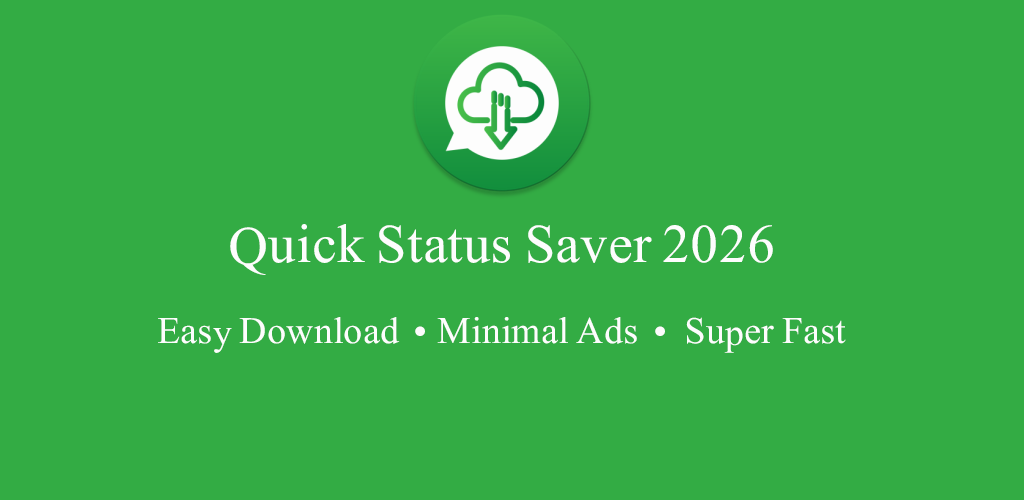
<style>
.page{position:relative;width:1024px;height:500px;background:#33ac44}
.page>*{position:absolute;margin:0}
.t1{font:66.7px "Jameel-Noori-Kasheeda";color:#fdfdfd}
.t2{font:45.8px "Jameel-Noori-Kasheeda";color:#fdfdfd}
.t3{font:45.8px "MyriadPro-Regular";color:#fdfdfd}
</style>
<div class="page">
<p class="t1" style="left:230px;top:224px;width:543px;height:51px">Quick Status Saver 2026</p>
<p class="t2" style="left:158px;top:317px;width:688px;height:36px">Easy Download  <span class="t3">• </span>Minimal Ads  <span class="t3">• </span> Super Fast</p>
</div>
